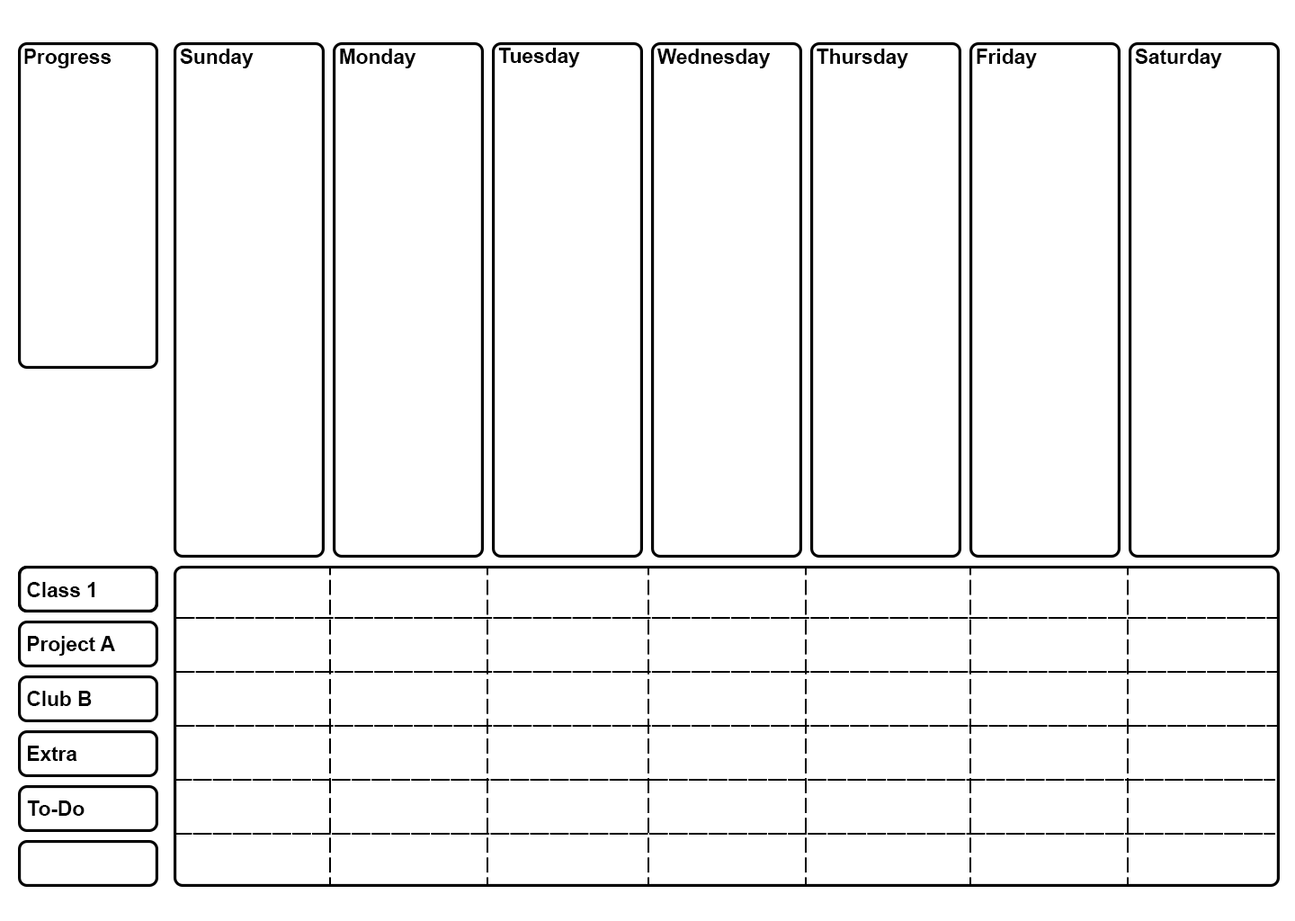
<style>
.page{position:relative;width:1295px;height:921px;background:#ffffff}
.page>*{position:absolute;margin:0}
.t1{font:20.4px "Arial-BoldMT";color:#000000}
</style>
<div class="page">
<p class="t1" style="left:24px;top:49px;width:88px;height:19px">Progress</p>
<p class="t1" style="left:180px;top:49px;width:74px;height:19px">Sunday</p>
<p class="t1" style="left:340px;top:49px;width:76px;height:19px">Monday</p>
<p class="t1" style="left:498px;top:48px;width:82px;height:19px">Tuesday</p>
<p class="t1" style="left:656px;top:49px;width:115px;height:19px">Wednesday</p>
<p class="t1" style="left:817px;top:49px;width:91px;height:19px">Thursday</p>
<p class="t1" style="left:977px;top:49px;width:60px;height:19px">Friday</p>
<p class="t1" style="left:1135px;top:49px;width:87px;height:19px">Saturday</p>
<p class="t1" style="left:27px;top:582px;width:67px;height:15px">Class 1</p>
<p class="t1" style="left:28px;top:636px;width:87px;height:20px">Project A</p>
<p class="t1" style="left:27px;top:691px;width:65px;height:15px">Club B</p>
<p class="t1" style="left:28px;top:745px;width:49px;height:16px">Extra</p>
<p class="t1" style="left:27px;top:800px;width:58px;height:16px">To-Do</p>
</div>
